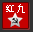
<style>
.page{position:relative;width:33px;height:32px;background:#c50000}
.page>*{position:absolute;margin:0}
.t1{font:10.4px "SimSun";color:#ffffff}
</style>
<div class="page">
<p class="t1" style="left:6px;top:4px;width:19px;height:9px">红九</p>
</div>
